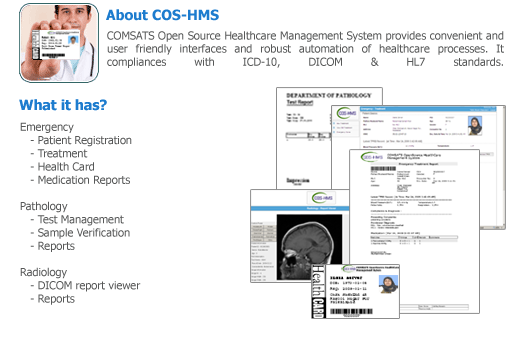
<style>
.page{position:relative;width:524px;height:341px;background:#ffffff}
.page>*{position:absolute;margin:0}
.t1{font:14px "Tahoma-Bold";color:#1d7cce}
.t2{font:11px "Tahoma";color:#575858}
</style>
<div class="page">
<p class="t1" style="left:106px;top:9px;width:113px;height:12px">About COS-HMS</p>
<p class="t2" style="left:107px;top:31px;width:397px;height:37px;text-align:justify">COMSATS Open Source Healthcare Management System provides convenient and user friendly interfaces and robust automation of healthcare processes. It compliances with ICD-10, DICOM &amp; HL7 standards.</p>
<p class="t1" style="left:19px;top:99px;width:88px;height:12px">What it has?</p>
<p class="t2" style="left:20px;top:122px;width:121px;height:183px">Emergency<br>   - Patient Registration<br>   - Treatment<br>   - Health Card<br>   - Medication Reports<br><br>Pathology<br>   - Test Management<br>   - Sample Verification<br>   - Reports<br><br>Radiology<br>   - DICOM report viewer<br>   - Reports</p>
</div>
